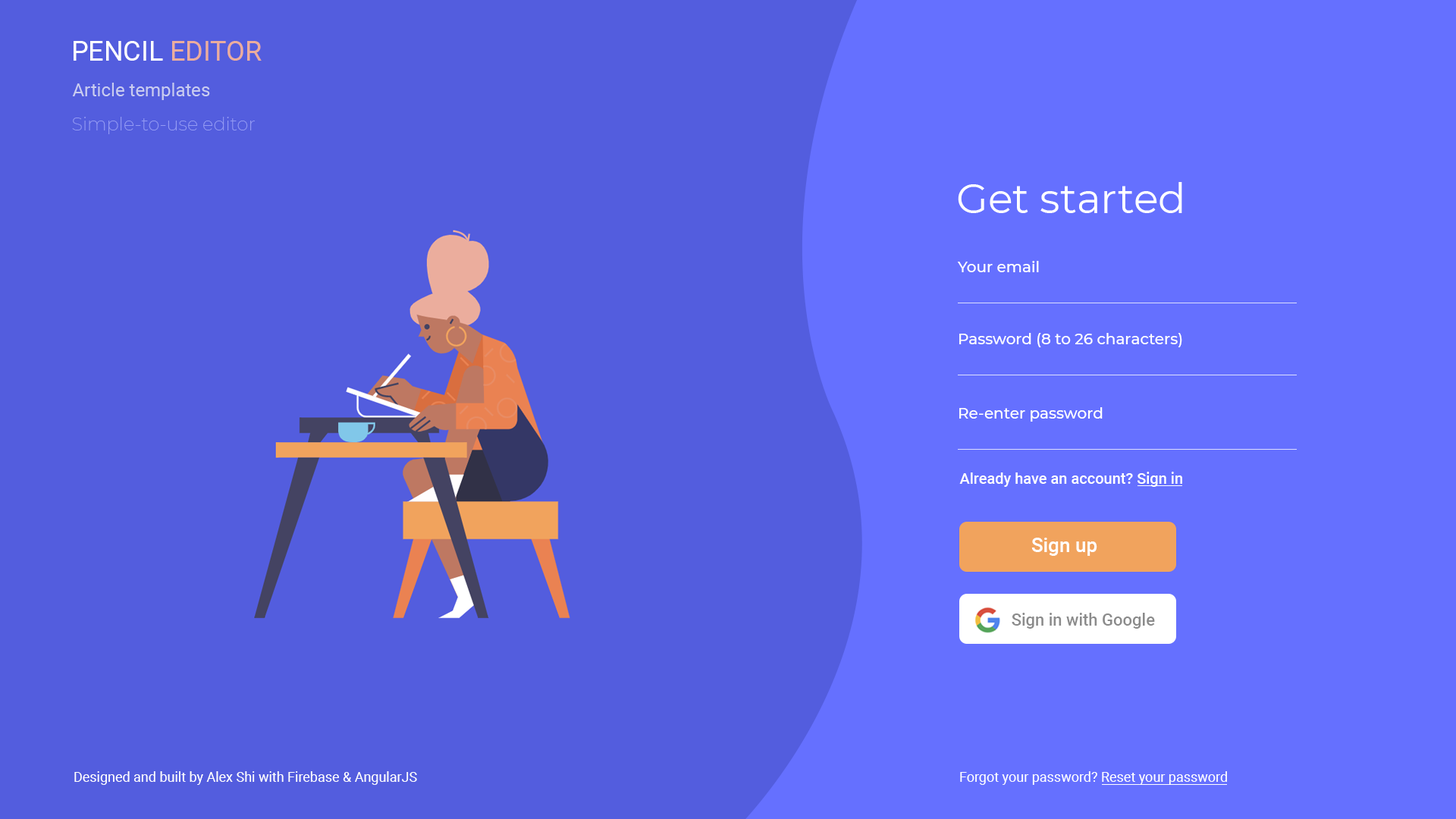
<style>
.page{position:relative;width:1456px;height:819px;background:#535dde}
.page>*{position:absolute;margin:0}
.t1{font:27.3px "Roboto-Regular";color:#ffffff}
.t2{font:27.3px "Roboto-Regular";color:#ebad9d}
.t3{font:18.2px "Roboto-Regular";color:#c9ccf0}
.t4{font:18.2px "Montserrat-ExtraLight";color:#949bf4}
.t5{font:40.9px "Montserrat-Regular";color:#ffffff}
.t6{font:15.2px "Montserrat-Medium";color:#ffffff}
.t7{font:15.2px "Roboto-Medium";color:#ffffff}
.t8{font:19.7px "Roboto-Medium";color:#ffffff}
.t9{font:16.7px "Roboto-Medium";color:#8b8b8b}
.t10{font:13.6px "Roboto-Regular";color:#ffffff}
</style>
<div class="page">
<p class="t1" style="left:74px;top:41px;width:188px;height:20px">PENCIL <span class="t2">EDITOR</span></p>
<p class="t3" style="left:72px;top:83px;width:138px;height:17px">Article templates</p>
<p class="t4" style="left:72px;top:117px;width:183px;height:17px">Simple-to-use editor</p>
<p class="t5" style="left:958px;top:182px;width:224px;height:31px">Get started</p>
<p class="t6" style="left:957px;top:261px;width:82px;height:11px">Your email</p>
<p class="t6" style="left:959px;top:333px;width:223px;height:14px">Password (8 to 26 characters)</p>
<p class="t6" style="left:959px;top:407px;width:144px;height:15px">Re-enter password</p>
<p class="t7" style="left:959px;top:472px;width:223px;height:15px">Already have an account? Sign in</p>
<p class="t8" style="left:1031px;top:538px;width:66px;height:18px">Sign up</p>
<p class="t9" style="left:1012px;top:613px;width:143px;height:16px">Sign in with Google</p>
<p class="t10" style="left:74px;top:771px;width:343px;height:14px">Designed and built by Alex Shi with Firebase &amp; AngularJS</p>
<p class="t10" style="left:960px;top:771px;width:267px;height:14px">Forgot your password? Reset your password</p>
</div>
